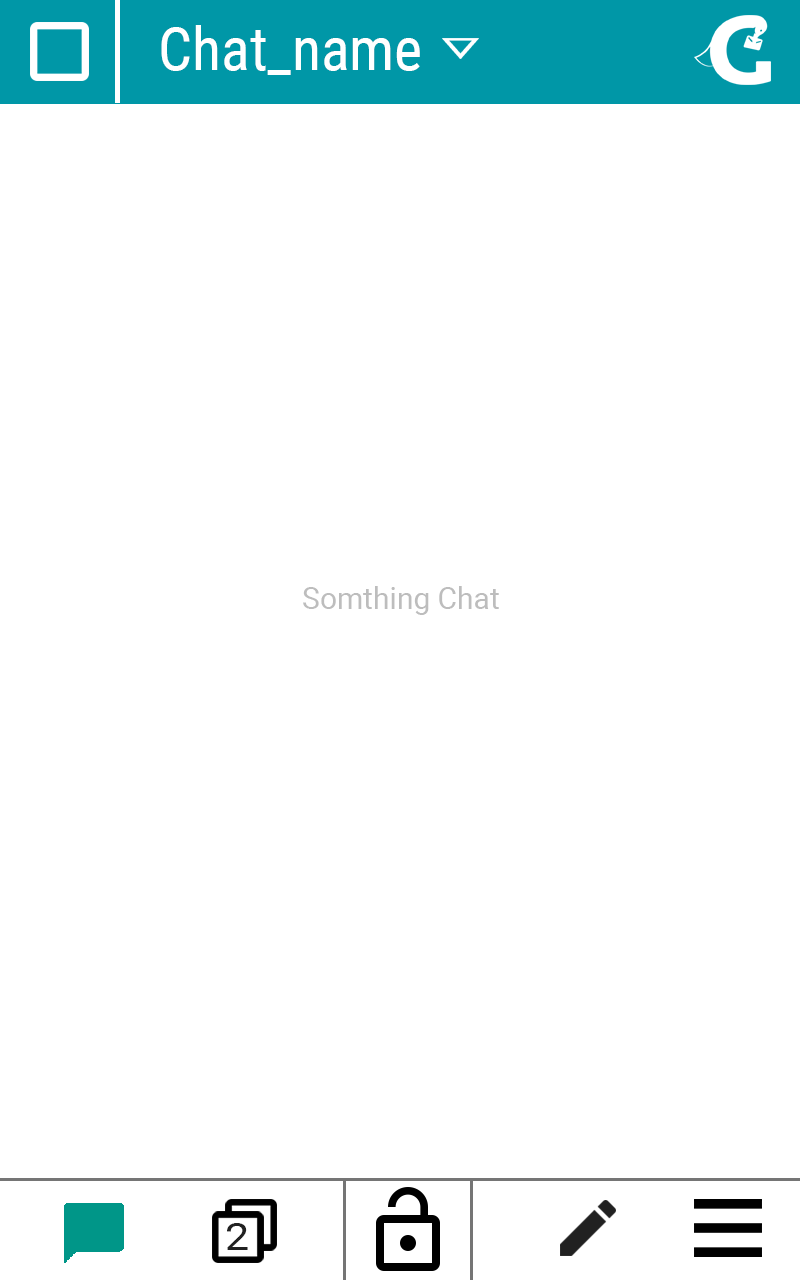
<style>
.page{position:relative;width:800px;height:1280px;background:#ffffff}
.page>*{position:absolute;margin:0}
.t1{font:60px "RobotoCondensed-Regular";color:#ffffff}
.t2{font:30px "Roboto-Regular";color:#bdbdbd}
.t3{font:37.5px "Roboto-Regular";color:#212121;scale:1.16 1}
</style>
<div class="page">
<p class="t1" style="left:161px;top:25px;width:259px;height:50px">Chat_name</p>
<p class="t2" style="left:303px;top:586px;width:196px;height:29px">Somthing Chat</p>
<p class="t3" style="left:227px;top:1223px;width:21px;height:27px">2</p>
</div>
